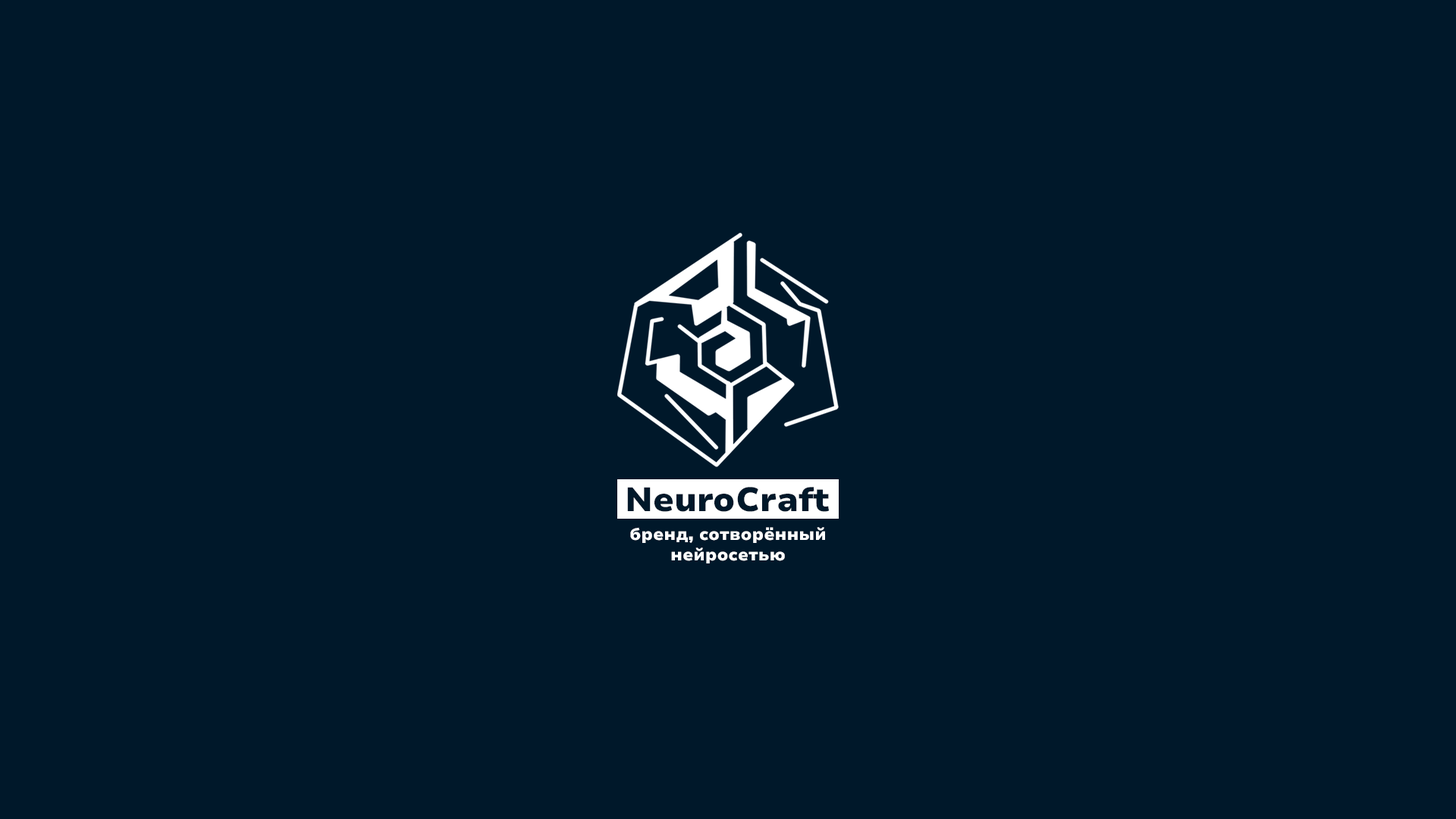
<style>
.page{position:relative;width:1456px;height:819px;background:#00182a}
.page>*{position:absolute;margin:0}
.t1{font:33.7px "NunitoSans7pt-Black";color:#00182a}
.t2{font:16.8px "NunitoSans7pt-Black";color:#ffffff}
</style>
<div class="page">
<p class="t1" style="left:627px;top:487px;width:202px;height:25px">NeuroСraft</p>
<p class="t2" style="left:630px;top:527px;width:195px;height:36px;text-align:center">бренд, сотворённый<br>нейросетью</p>
</div>
